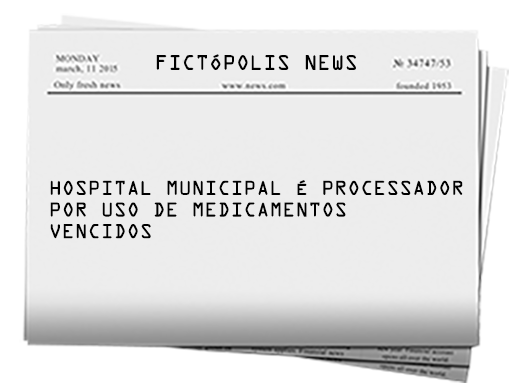
<style>
.page{position:relative;width:512px;height:387px;background:#ededed}
.page>*{position:absolute;margin:0}
.t1{font:18.8px "OCRAStd";color:#000000}
.t2{font:18px "OCRAStd";color:#000000}
</style>
<div class="page">
<p class="t1" style="left:156px;top:54px;width:200px;height:16px">FICTÓPOLIS NEWS</p>
<p class="t2" style="left:50px;top:180px;width:413px;height:59px">HOSPITAL MUNICIPAL É PROCESSADOR<br>POR USO DE MEDICAMENTOS<br>VENCIDOS</p>
</div>
